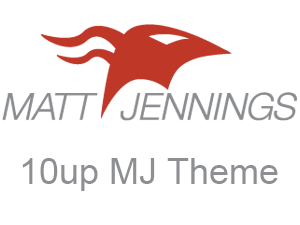
<style>
.page{position:relative;width:300px;height:225px;background:#ffffff}
.page>*{position:absolute;margin:0}
.t1{font:36px "ArialMT";color:#8d8f92}
</style>
<div class="page">
<p class="t1" style="left:22px;top:158px;width:256px;height:33px">10up MJ Theme</p>
</div>
